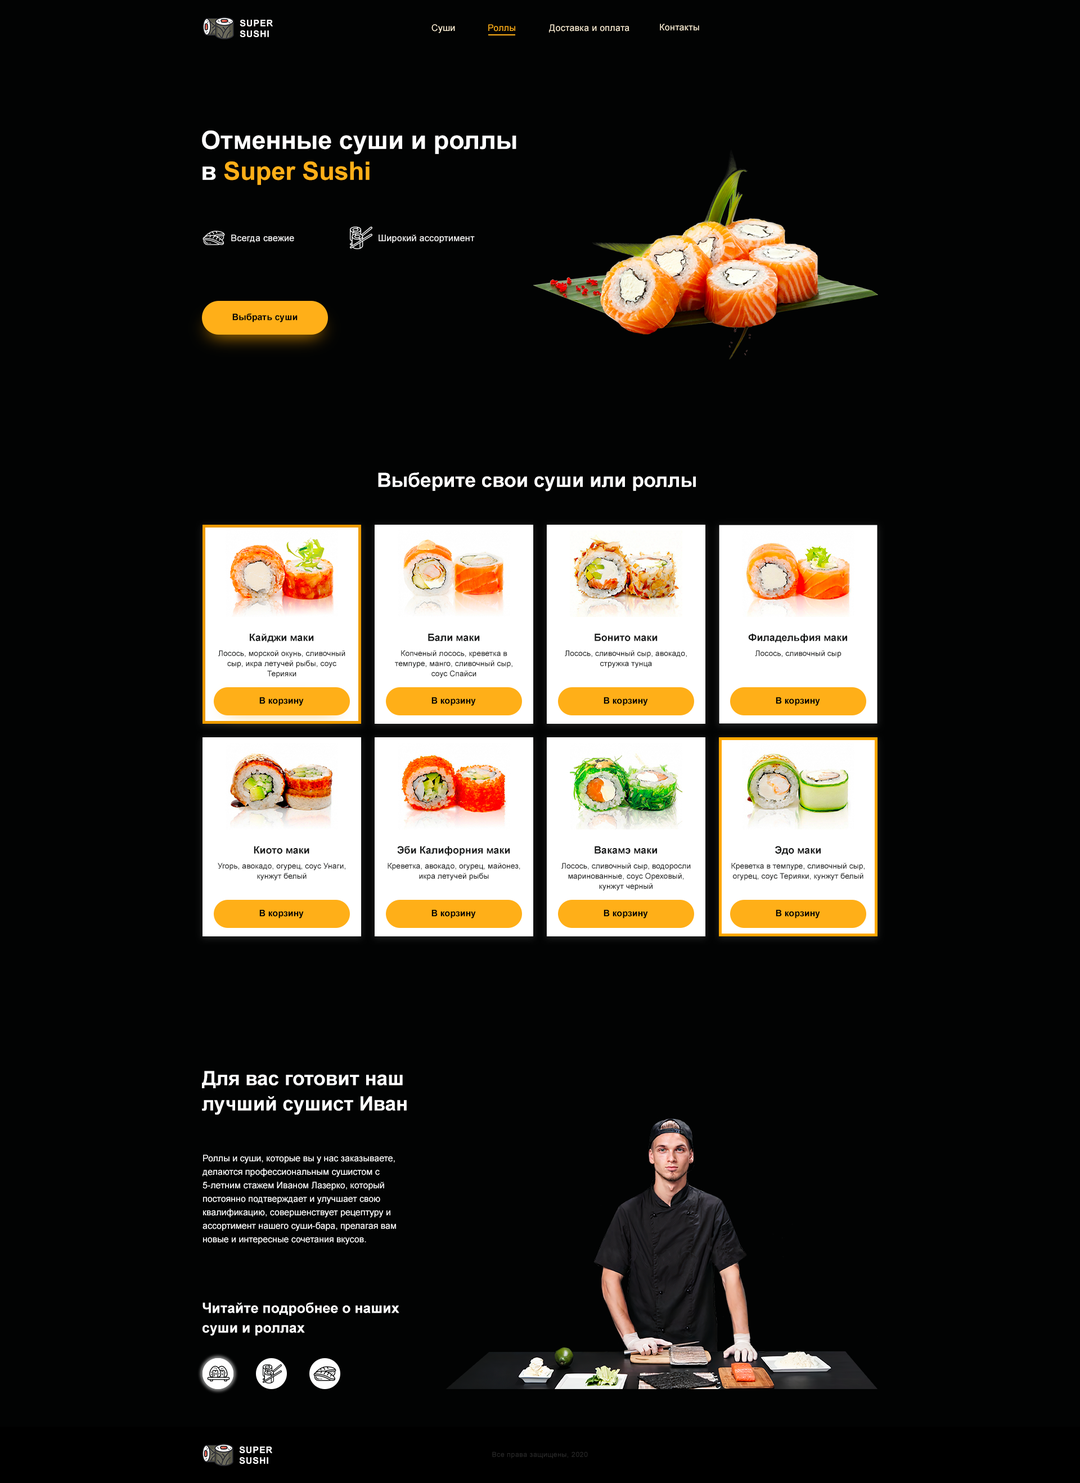
<style>
.page{position:relative;width:1080px;height:1483px;background:#020303}
.page>*{position:absolute;margin:0}
.t1{font:9px "Arial-BoldMT";letter-spacing:0.06em;color:#ffffff;text-transform:uppercase}
.t2{font:9px "ArialMT";letter-spacing:0.02em;color:#fdefd5}
.t3{font:9px "ArialMT";letter-spacing:0.02em;color:#ffaf18}
.t4{font:25.3px/30.9px "Arial-BoldMT";color:#ffffff}
.t5{font:25.3px/30.9px "Arial-BoldMT";color:#ffaf18}
.t6{font:9px "ArialMT";letter-spacing:0.02em;color:#ffffff}
.t7{font:9px "Arial-BoldMT";color:#020303}
.t8{font:19.7px "Arial-BoldMT";color:#ffffff}
.t9{font:10.1px "Arial-BoldMT";color:#181a1a}
.t10{font:7.9px/10.1px "ArialMT";color:#181a1a}
.t11{font:7.9px "ArialMT";color:#181a1a}
.t12{font:19.7px/25.3px "Arial-BoldMT";color:#ffffff}
.t13{font:9px/13.5px "ArialMT";color:#ffffff}
.t14{font:14.1px/19.7px "Arial-BoldMT";color:#ffffff}
.t15{font:6.8px "ArialMT";letter-spacing:0.06em;color:#2c2c2c}
</style>
<div class="page">
<p class="t1" style="left:240px;top:20px;width:33px;height:17px">super<br>sushi</p>
<p class="t2" style="left:431px;top:24px;width:24px;height:9px">Суши</p>
<p class="t3" style="left:488px;top:24px;width:27px;height:8px">Роллы</p>
<p class="t2" style="left:549px;top:24px;width:80px;height:9px">Доставка и оплата</p>
<p class="t2" style="left:660px;top:24px;width:39px;height:7px">Контакты</p>
<p class="t4" style="left:202px;top:130px;width:314px;height:55px">Отменные суши и роллы<br>в <span class="t5">Super Sushi</span></p>
<p class="t6" style="left:231px;top:235px;width:63px;height:7px">Всегда свежие</p>
<p class="t6" style="left:379px;top:235px;width:96px;height:8px">Широкий ассортимент</p>
<p class="t7" style="left:232px;top:313px;width:66px;height:9px">Выбрать суши</p>
<p class="t8" style="left:378px;top:472px;width:318px;height:20px">Выберите свои суши или роллы</p>
<p class="t9" style="left:250px;top:633px;width:64px;height:10px">Кайджи маки</p>
<p class="t9" style="left:428px;top:633px;width:52px;height:8px">Бали маки</p>
<p class="t9" style="left:595px;top:633px;width:63px;height:8px">Бонито маки</p>
<p class="t9" style="left:748px;top:633px;width:99px;height:11px">Филадельфия маки</p>
<p class="t10" style="left:218px;top:650px;width:127px;height:28px;text-align:center">Лосось, морской окунь, сливочный сыр, икра летучей рыбы, соус Терияки</p>
<p class="t10" style="left:395px;top:650px;width:117px;height:28px;text-align:center">Копченый лосось, креветка в темпуре, манго, сливочный сыр, соус Спайси</p>
<p class="t10" style="left:565px;top:650px;width:122px;height:18px;text-align:center">Лосось, сливочный сыр, авокадо, стружка тунца</p>
<p class="t11" style="left:755px;top:650px;width:87px;height:8px">Лосось, сливочный сыр</p>
<p class="t7" style="left:259px;top:697px;width:45px;height:9px">В корзину</p>
<p class="t7" style="left:431px;top:697px;width:45px;height:9px">В корзину</p>
<p class="t7" style="left:604px;top:697px;width:44px;height:9px">В корзину</p>
<p class="t7" style="left:776px;top:697px;width:44px;height:9px">В корзину</p>
<p class="t9" style="left:254px;top:846px;width:55px;height:8px">Киото маки</p>
<p class="t9" style="left:397px;top:846px;width:113px;height:10px">Эби Калифорния маки</p>
<p class="t9" style="left:595px;top:846px;width:62px;height:8px">Вакамэ маки</p>
<p class="t9" style="left:775px;top:846px;width:46px;height:10px">Эдо маки</p>
<p class="t10" style="left:218px;top:863px;width:127px;height:18px;text-align:center">Угорь, авокадо, огурец, соус Унаги, кунжут белый</p>
<p class="t10" style="left:388px;top:863px;width:132px;height:18px;text-align:center">Креветка, авокадо, огурец, майонез, икра летучей рыбы</p>
<p class="t10" style="left:561px;top:863px;width:130px;height:28px;text-align:center">Лосось, сливочный сыр, водоросли маринованные, соус Ореховый, кунжут черный</p>
<p class="t10" style="left:731px;top:863px;width:134px;height:18px;text-align:center">Креветка в темпуре, сливочный сыр, огурец, соус Терияки, кунжут белый</p>
<p class="t7" style="left:259px;top:910px;width:45px;height:9px">В корзину</p>
<p class="t7" style="left:431px;top:910px;width:45px;height:9px">В корзину</p>
<p class="t7" style="left:604px;top:910px;width:44px;height:9px">В корзину</p>
<p class="t7" style="left:776px;top:910px;width:44px;height:9px">В корзину</p>
<p class="t12" style="left:202px;top:1071px;width:205px;height:44px">Для вас готовит наш лучший сушист Иван</p>
<p class="t13" style="left:202px;top:1155px;width:194px;height:90px">Роллы и суши, которые вы у нас заказываете, делаются профессиональным сушистом с 5-летним стажем Иваном Лазерко, который постоянно подтверждает и улучшает свою квалификацию, совершенствует рецептуру и ассортимент нашего суши-бара, прелагая вам новые и интересные сочетания вкусов.</p>
<p class="t14" style="left:202px;top:1303px;width:197px;height:33px">Читайте подробнее о наших суши и роллах</p>
<p class="t1" style="left:239px;top:1447px;width:33px;height:17px">super<br>sushi</p>
<p class="t15" style="left:492px;top:1452px;width:96px;height:7px">Все права защищены, 2020</p>
</div>
